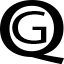
<style>
.page{position:relative;width:64px;height:64px;background:#ffffff}
.page>*{position:absolute;margin:0}
.t1{font:81.4px "MyriadPro-Regular";color:#000000;scale:1.27 1}
.t2{font:48.6px "MyriadPro-Regular";color:#000000;scale:1.27 1}
</style>
<div class="page">
<p class="t1" style="left:0px;top:0px;width:65px;height:65px">Q</p>
<p class="t2" style="left:12px;top:11px;width:35px;height:33px">G</p>
</div>
